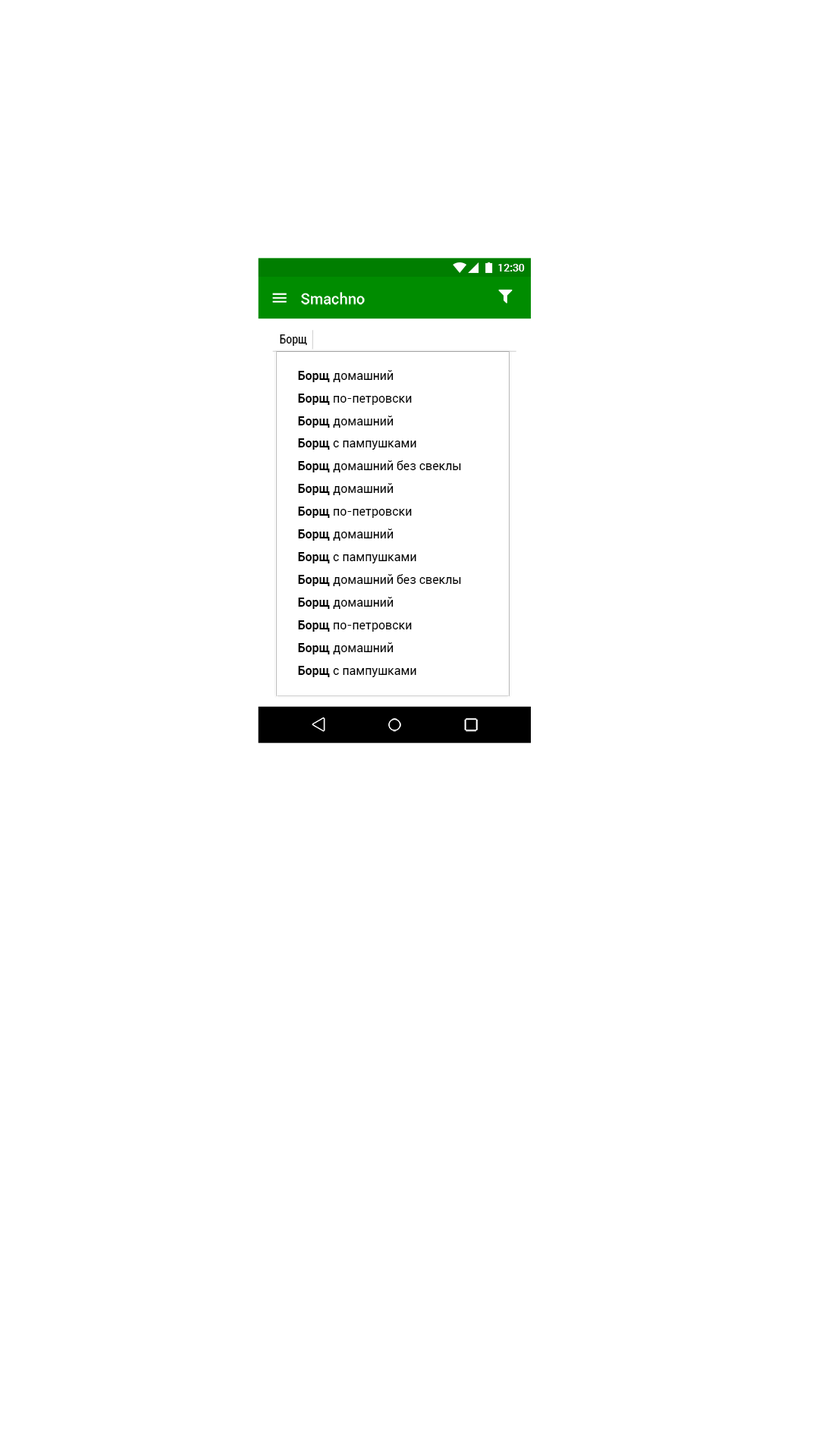
<style>
.page{position:relative;width:819px;height:1456px;background:#ffffff}
.page>*{position:absolute;margin:0}
.t1{font:10.6px "Roboto-Medium";color:#ffffff}
.t2{font:15.1px "Roboto-Medium";color:#ffffff}
.t3{font:12.1px "Roboto-Condensed";color:#000000}
.t4{font:12.1px/22.7px "Roboto-Regular";color:#000000}
.t5{font:12.1px/22.7px "Roboto-Bold";color:#000000}
</style>
<div class="page">
<p class="t1" style="left:498px;top:264px;width:27px;height:7px">12:30</p>
<p class="t2" style="left:301px;top:292px;width:64px;height:13px">Smachno</p>
<p class="t3" style="left:280px;top:334px;width:27px;height:12px">Борщ</p>
<p class="t4" style="left:298px;top:370px;width:163px;height:307px"><span class="t5">Борщ</span> домашний <br><span class="t5">Борщ</span> по-петровски<br><span class="t5">Борщ</span> домашний<br><span class="t5">Борщ</span> с пампушками<br><span class="t5">Борщ</span> домашний без свеклы<br><span class="t5">Борщ</span> домашний <br><span class="t5">Борщ</span> по-петровски<br><span class="t5">Борщ</span> домашний<br><span class="t5">Борщ</span> с пампушками<br><span class="t5">Борщ</span> домашний без свеклы<br><span class="t5">Борщ</span> домашний <br><span class="t5">Борщ</span> по-петровски<br><span class="t5">Борщ</span> домашний<br><span class="t5">Борщ</span> с пампушками</p>
</div>
